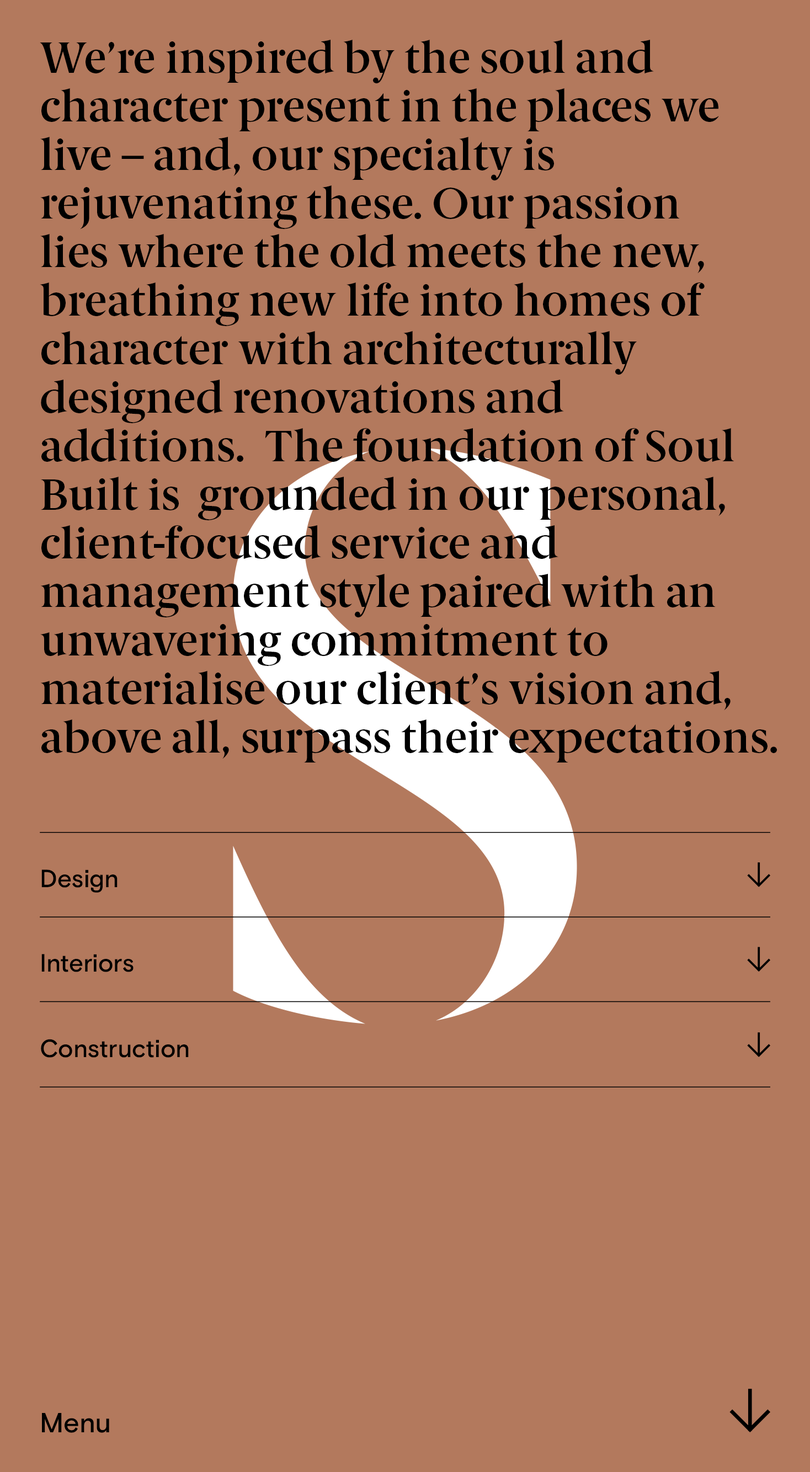
<style>
.page{position:relative;width:810px;height:1472px;background:#b3795d}
.page>*{position:absolute;margin:0}
.t1{font:44.1px "BerlingskeSerif-DemiBold";color:#000000}
.t2{font:44.1px "BerlingskeSerif-DemiBold";letter-spacing:-0.069em;color:#000000}
.t3{font:44.1px "BerlingskeSerif-DemiBold";letter-spacing:-0.019em;color:#000000}
.t4{font:44.1px "BerlingskeSerif-DemiBold";letter-spacing:-0.03em;color:#000000}
.t5{font:44.1px "BerlingskeSerif-DemiBold";letter-spacing:-0.02em;color:#000000}
.t6{font:44.1px "BerlingskeSerif-DemiBold";letter-spacing:-0.05em;color:#000000}
.t7{font:44.1px "BerlingskeSerif-DemiBold";letter-spacing:-0.029em;color:#000000}
.t8{font:44.1px "BerlingskeSerif-DemiBold";letter-spacing:-0.039em;color:#000000}
.t9{font:44.1px "BerlingskeSerif-DemiBold";letter-spacing:-0.079em;color:#000000}
.t10{font:44.1px "BerlingskeSerif-DemiBold";letter-spacing:-0.04em;color:#000000}
.t11{font:44.1px "BerlingskeSerif-DemiBold";letter-spacing:-0.01em;color:#000000}
.t12{font:25px "BasisGrotesquePro-Medium";color:#000000}
.t13{font:25px "BasisGrotesquePro-Medium";letter-spacing:-0.012em;color:#000000}
.t14{font:25px "BasisGrotesquePro-Medium";letter-spacing:-0.028em;color:#000000}
.t15{font:25px "BasisGrotesquePro-Medium";letter-spacing:-0.015em;color:#000000}
.t16{font:25px "BasisGrotesquePro-Medium";letter-spacing:-0.004em;color:#000000}
.t17{font:25px "BasisGrotesquePro-Medium";letter-spacing:-0.019em;color:#000000}
.t18{font:25px "BasisGrotesquePro-Medium";letter-spacing:-0.024em;color:#000000}
.t19{font:25px "BasisGrotesquePro-Medium";letter-spacing:-0.023em;color:#000000}
.t20{font:25px "BasisGrotesquePro-Medium";letter-spacing:-0.01em;color:#000000}
.t21{font:25px "BasisGrotesquePro-Medium";letter-spacing:-0.009em;color:#000000}
.t22{font:27.6px "BasisGrotesquePro-Medium";letter-spacing:-0.007em;color:#000000}
.t23{font:27.6px "BasisGrotesquePro-Medium";color:#000000}
.t24{font:27.6px "BasisGrotesquePro-Medium";letter-spacing:-0.009em;color:#000000}
</style>
<div class="page">
<p class="t1" style="left:40px;top:40px;width:614px;height:43px"><span class="t2">W</span>e’<span class="t3">r</span>e inspi<span class="t3">r</span>ed <span class="t4">b</span>y the soul and</p>
<p class="t1" style="left:41px;top:88px;width:678px;height:44px">cha<span class="t3">r</span>acter p<span class="t5">r</span>esent in the pla<span class="t5">c</span>es <span class="t6">w</span>e</p>
<p class="t1" style="left:40px;top:137px;width:514px;height:43px">l<span class="t7">i</span><span class="t6">v</span>e – and, our specialty is</p>
<p class="t1" style="left:40px;top:185px;width:640px;height:44px"><span class="t3">r</span>ej<span class="t8">u</span><span class="t6">v</span>enating thes<span class="t5">e</span>. Our passion</p>
<p class="t1" style="left:40px;top:234px;width:664px;height:39px">lies <span class="t8">w</span>he<span class="t5">r</span>e the old meets the n<span class="t5">e</span><span class="t9">w</span>,</p>
<p class="t1" style="left:40px;top:283px;width:665px;height:43px">b<span class="t3">r</span>eathing n<span class="t5">e</span>w life into homes of</p>
<p class="t1" style="left:41px;top:331px;width:596px;height:44px">cha<span class="t3">r</span>acter <span class="t5">w</span>ith a<span class="t3">r</span>chitectu<span class="t5">r</span>al<span class="t4">l</span>y</p>
<p class="t1" style="left:41px;top:380px;width:523px;height:43px">designed <span class="t5">r</span>en<span class="t8">o</span><span class="t10">v</span>ations and</p>
<p class="t1" style="left:41px;top:428px;width:693px;height:34px">additions.  The foundation of Soul</p>
<p class="t1" style="left:41px;top:477px;width:684px;height:43px"><span class="t11">B</span>uilt is  g<span class="t5">r</span>ounded in our pe<span class="t11">r</span>sonal,</p>
<p class="t1" style="left:41px;top:525px;width:517px;height:34px">clien<span class="t4">t</span><span class="t3">-</span>fo<span class="t3">c</span>used ser<span class="t3">v</span>i<span class="t3">c</span>e and</p>
<p class="t1" style="left:41px;top:574px;width:675px;height:43px">management <span class="t4">s</span>t<span class="t10">y</span>le pai<span class="t5">r</span>ed <span class="t3">w</span>ith an</p>
<p class="t1" style="left:40px;top:624px;width:568px;height:42px">u<span class="t8">nw</span><span class="t4">a</span><span class="t6">v</span>ering <span class="t5">c</span>ommitment to</p>
<p class="t1" style="left:41px;top:671px;width:690px;height:39px">materialise our client’s <span class="t5">v</span>ision and,</p>
<p class="t1" style="left:41px;top:720px;width:736px;height:43px">ab<span class="t8">o</span><span class="t6">v</span>e all, <span class="t4">s</span>urpass their <span class="t10">e</span>xpectations.</p>
<p class="t12" style="left:41px;top:870px;width:77px;height:23px">D<span class="t13">e</span>sign</p>
<p class="t12" style="left:41px;top:954px;width:93px;height:18px">I<span class="t14">n</span><span class="t15">t</span>er<span class="t16">i</span>o<span class="t17">r</span>s</p>
<p class="t12" style="left:41px;top:1039px;width:148px;height:19px"><span class="t18">C</span>o<span class="t19">n</span><span class="t20">s</span>tru<span class="t21">c</span>t<span class="t16">i</span>on</p>
<p class="t22" style="left:42px;top:1413px;width:67px;height:20px">M<span class="t23">e</span><span class="t24">n</span><span class="t23">u</span></p>
</div>
